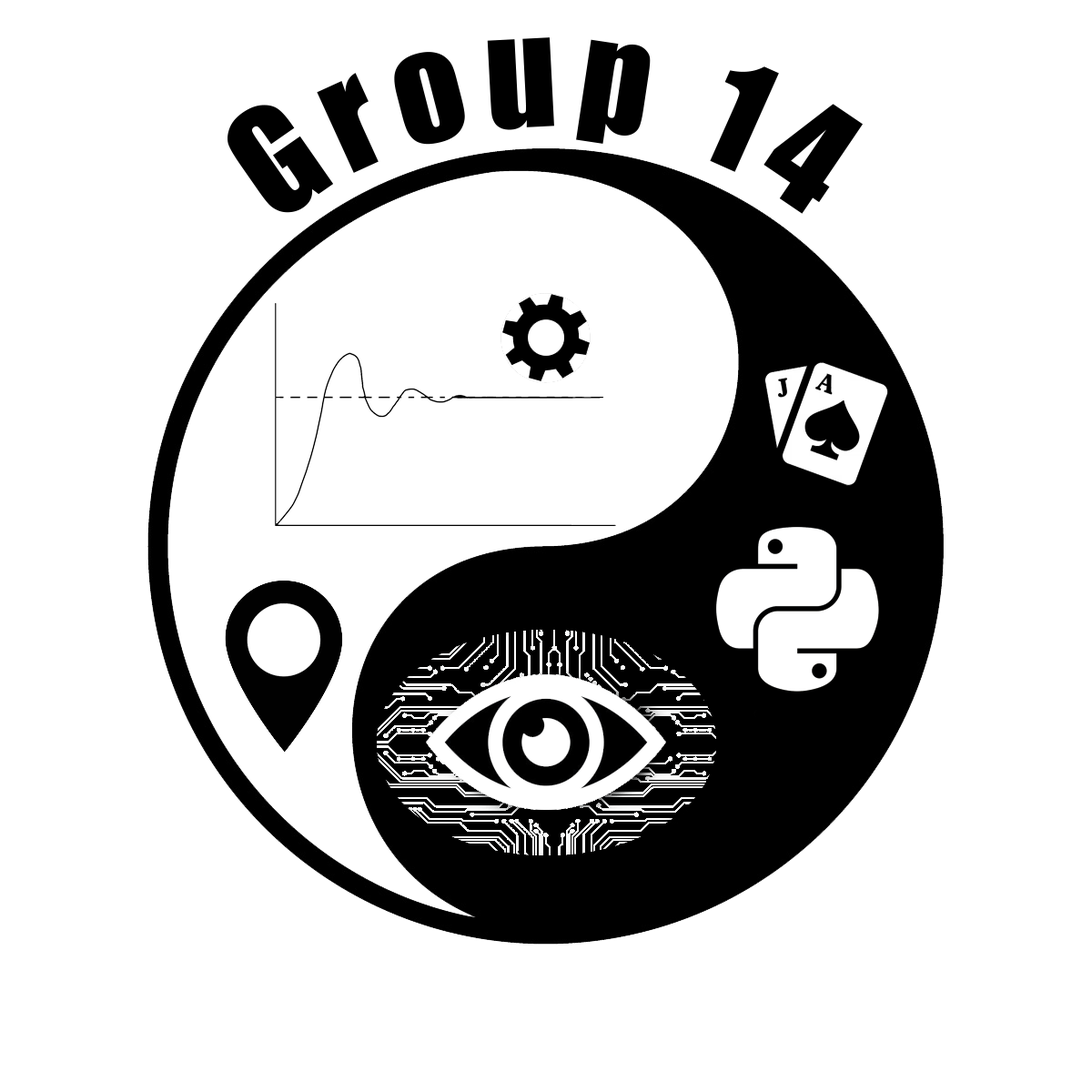
<style>
.page{position:relative;width:1092px;height:1092px;background:#ffffff}
.page>*{position:absolute;margin:0}
.t1{font:136.5px "Impact";letter-spacing:0.1em;color:#000000}
</style>
<div class="page">
<p class="t1" style="left:227px;top:37px;width:636px;height:177px">Group 14</p>
</div>
